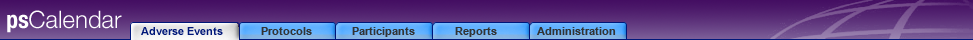
<style>
.page{position:relative;width:973px;height:40px}
.page>*{position:absolute;margin:0}
.t1{font:24px "HelveticaNeue-Light";color:#ffffff}
.t2{font:24px "HelveticaNeue-CondensedBold";color:#ffffff}
.t3{font:11px "Arial-BoldMT";color:#001779}
.t4{font:11px "Arial-BoldMT";color:#333333}
</style>
<div class="page">
<p class="t1" style="left:7px;top:10px;width:115px;height:23px"><span class="t2">ps</span>Calendar</p>
<p class="t3" style="left:141px;top:27px;width:82px;height:8px">Adverse Events</p>
<p class="t4" style="left:261px;top:27px;width:51px;height:8px">Protocols</p>
<p class="t4" style="left:352px;top:27px;width:63px;height:10px">Participants</p>
<p class="t4" style="left:455px;top:27px;width:42px;height:10px">Reports</p>
<p class="t4" style="left:537px;top:27px;width:79px;height:8px">Administration</p>
</div>
